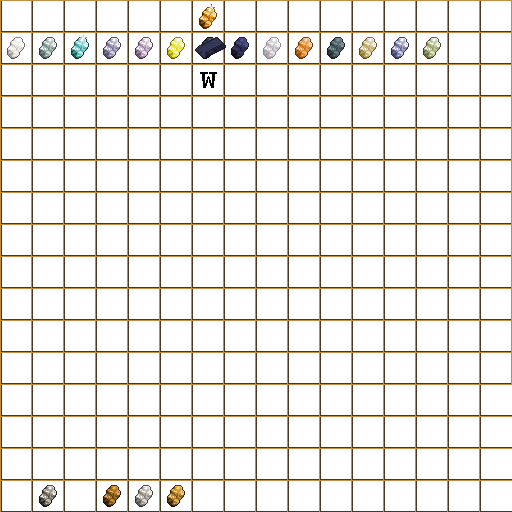
<style>
.page{position:relative;width:512px;height:512px;background:#ffffff}
.page>*{position:absolute;margin:0}
.t1{font:27px "CourierNewPS-BoldMT";color:#000000;text-transform:uppercase}
</style>
<div class="page">
<p class="t1" style="left:200px;top:72px;width:17px;height:16px">W</p>
</div>
